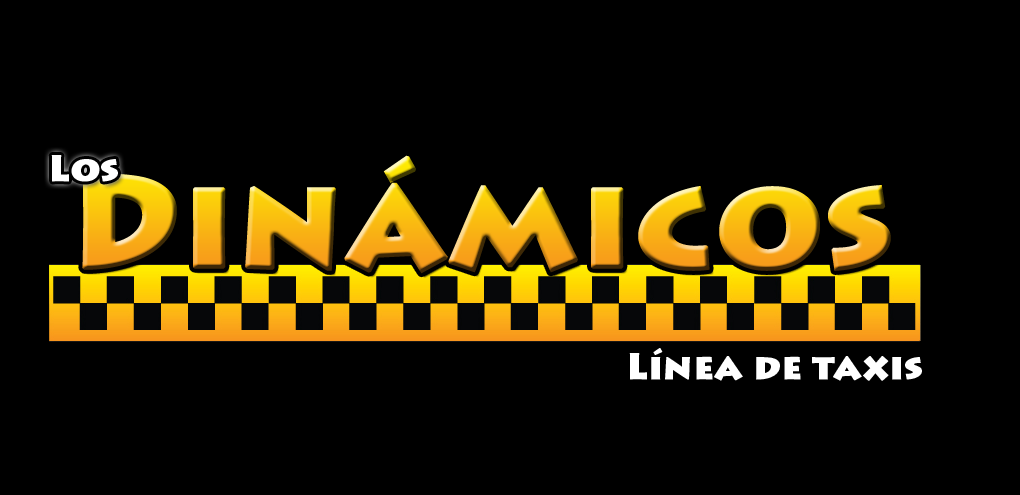
<style>
.page{position:relative;width:1020px;height:495px;background:#000000}
.page>*{position:absolute;margin:0}
.t1{font:36px "LithosPro-Black";color:#ffffff;font-weight:bold}
.t2{font:130px "LithosPro-Black";font-weight:bold}
</style>
<div class="page">
<p class="t1" style="left:51px;top:155px;width:67px;height:27px">Los</p>
<p class="t2" style="left:82px;top:155px;width:809px;height:119px">Dinámicos</p>
<p class="t1" style="left:629px;top:348px;width:293px;height:33px">Línea de taxis</p>
</div>
